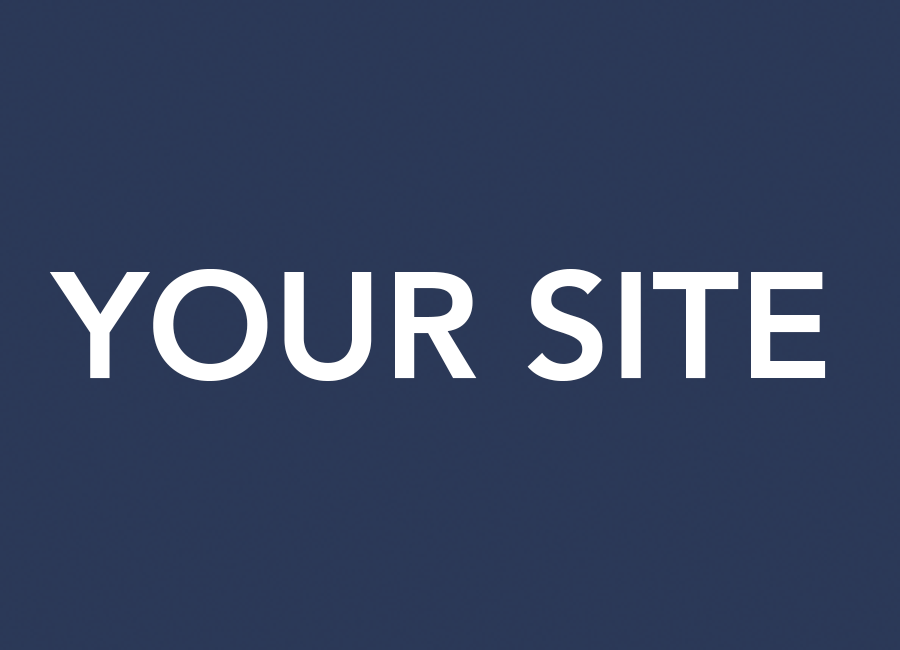
<style>
.page{position:relative;width:900px;height:650px;background:#2b3958}
.page>*{position:absolute;margin:0}
.t1{font:150.5px "Avenir-Heavy";color:#ffffff}
</style>
<div class="page">
<p class="t1" style="left:49px;top:269px;width:777px;height:112px">YOUR SITE</p>
</div>
